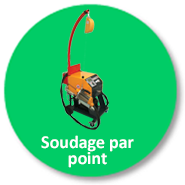
<style>
.page{position:relative;width:185px;height:185px;background:#00cc66}
.page>*{position:absolute;margin:0}
.t1{font:18px/16px "Calibri-Bold";color:#ffffff}
</style>
<div class="page">
<p class="t1" style="left:41px;top:135px;width:93px;height:33px;text-align:center">Soudage par <br>point</p>
</div>
